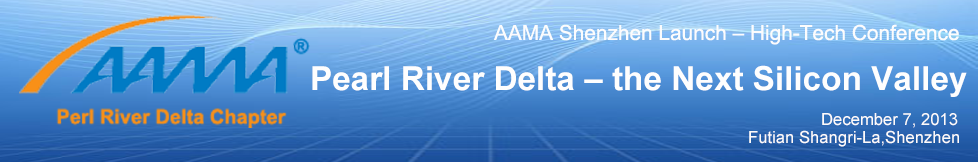
<style>
.page{position:relative;width:978px;height:162px}
.page>*{position:absolute;margin:0}
.t1{font:20.8px "ArialMT";color:#fcfcfd}
.t2{font:33.3px "Arial-BoldMT";color:#fefefe}
.t3{font:16.7px "ArialMT";color:#fdfbfb}
</style>
<div class="page">
<p class="t1" style="left:493px;top:24px;width:466px;height:21px">AAMA Shenzhen Launch – High-Tech Conference</p>
<p class="t2" style="left:312px;top:65px;width:655px;height:32px">Pearl River Delta – the Next Silicon Valley</p>
<p class="t3" style="left:822px;top:113px;width:136px;height:15px">December 7, 2013</p>
<p class="t3" style="left:749px;top:130px;width:210px;height:17px">Futian Shangri-La,Shenzhen</p>
</div>
